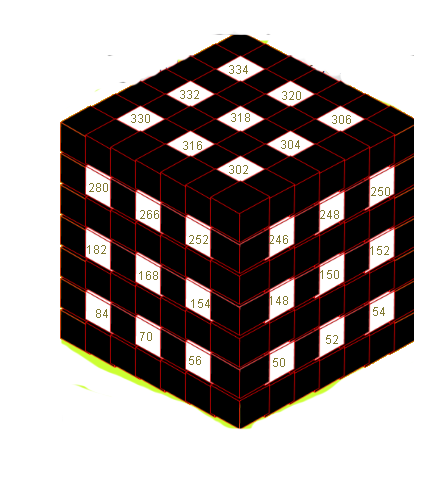
<style>
.page{position:relative;width:439px;height:480px;background:#ffffff}
.page>*{position:absolute;margin:0}
.t1{font:12px "ArialMT";color:#817931}
</style>
<div class="page">
<p class="t1" style="left:229px;top:65px;width:19px;height:9px">334</p>
<p class="t1" style="left:180px;top:90px;width:19px;height:9px">332</p>
<p class="t1" style="left:282px;top:91px;width:19px;height:9px">320</p>
<p class="t1" style="left:231px;top:113px;width:19px;height:9px">318</p>
<p class="t1" style="left:131px;top:114px;width:19px;height:9px">330</p>
<p class="t1" style="left:332px;top:115px;width:19px;height:9px">306</p>
<p class="t1" style="left:183px;top:141px;width:19px;height:9px">316</p>
<p class="t1" style="left:281px;top:140px;width:19px;height:9px">304</p>
<p class="t1" style="left:229px;top:165px;width:19px;height:9px">302</p>
<p class="t1" style="left:89px;top:183px;width:19px;height:9px">280</p>
<p class="t1" style="left:371px;top:187px;width:19px;height:9px">250</p>
<p class="t1" style="left:140px;top:210px;width:19px;height:9px">266</p>
<p class="t1" style="left:320px;top:210px;width:19px;height:9px">248</p>
<p class="t1" style="left:87px;top:245px;width:19px;height:9px">182</p>
<p class="t1" style="left:189px;top:235px;width:19px;height:9px">252</p>
<p class="t1" style="left:269px;top:235px;width:19px;height:9px">246</p>
<p class="t1" style="left:370px;top:246px;width:19px;height:9px">152</p>
<p class="t1" style="left:320px;top:270px;width:19px;height:9px">150</p>
<p class="t1" style="left:139px;top:271px;width:19px;height:9px">168</p>
<p class="t1" style="left:191px;top:299px;width:19px;height:9px">154</p>
<p class="t1" style="left:269px;top:296px;width:19px;height:9px">148</p>
<p class="t1" style="left:96px;top:309px;width:12px;height:9px">84</p>
<p class="t1" style="left:373px;top:307px;width:12px;height:9px">54</p>
<p class="t1" style="left:140px;top:332px;width:12px;height:9px">70</p>
<p class="t1" style="left:326px;top:335px;width:12px;height:9px">52</p>
<p class="t1" style="left:189px;top:356px;width:12px;height:9px">56</p>
<p class="t1" style="left:273px;top:358px;width:12px;height:9px">50</p>
</div>
